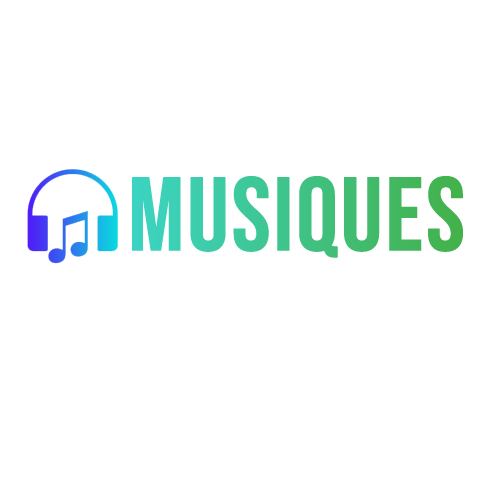
<style>
.page{position:relative;width:500px;height:500px;background:#ffffff}
.page>*{position:absolute;margin:0}
.t1{font:104.2px "BebasNeue-Regular";font-weight:bold}
</style>
<div class="page">
<p class="t1" style="left:132px;top:176px;width:331px;height:82px">Musiques</p>
</div>
